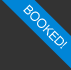
<style>
.page{position:relative;width:71px;height:70px;background:#333333}
.page>*{position:absolute;margin:0}
.t1{font:12.5px "HelveticaNeue";color:#ffffff;text-transform:uppercase}
</style>
<div class="page">
<p class="t1" style="left:23px;top:4px;width:45px;height:45px;rotate:45deg">BOOKED!</p>
</div>
